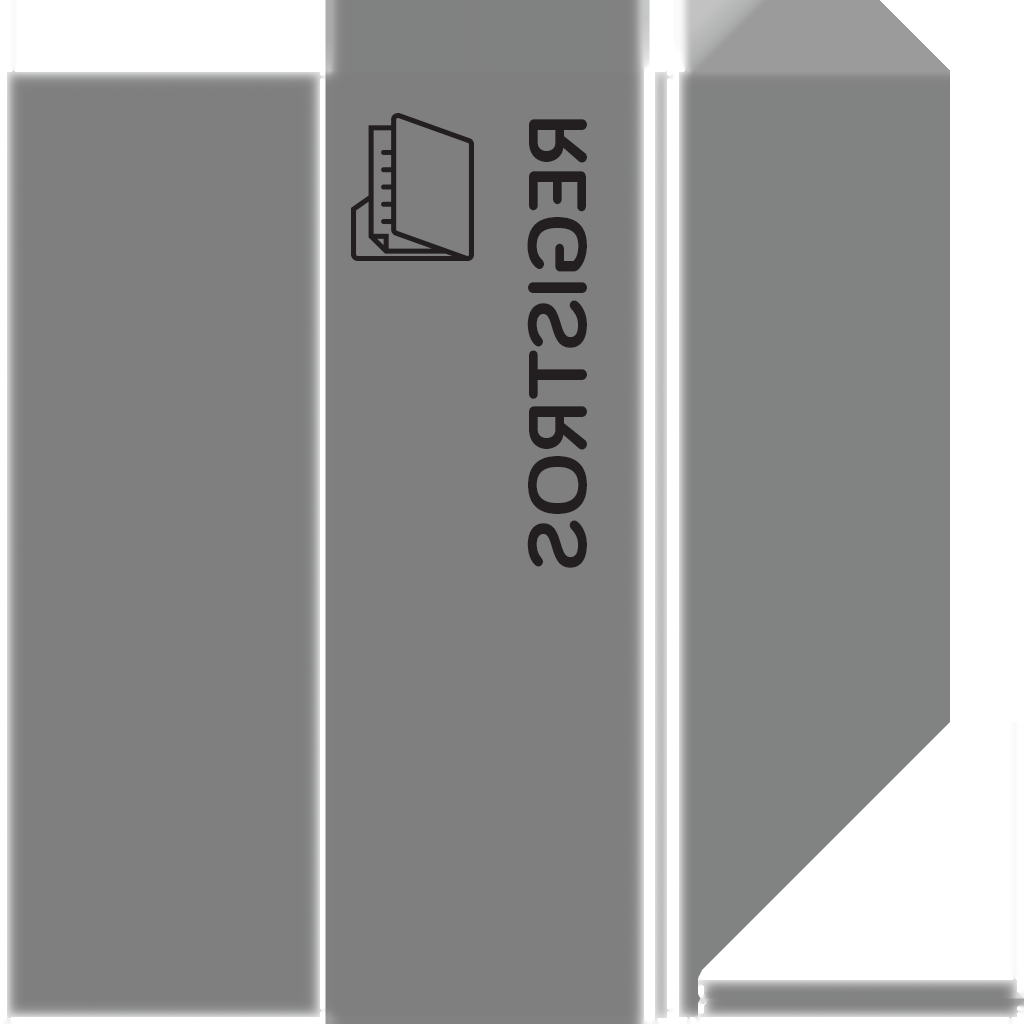
<style>
.page{position:relative;width:1024px;height:1024px;background:#7f7f7f}
.page>*{position:absolute;margin:0}
.t1{font:85px "Bariol-Bold";color:#231f20;scale:1.09 1}
</style>
<div class="page">
<p class="t1" style="left:527px;top:119px;width:60px;height:449px;rotate:90deg">REGISTROS</p>
</div>
